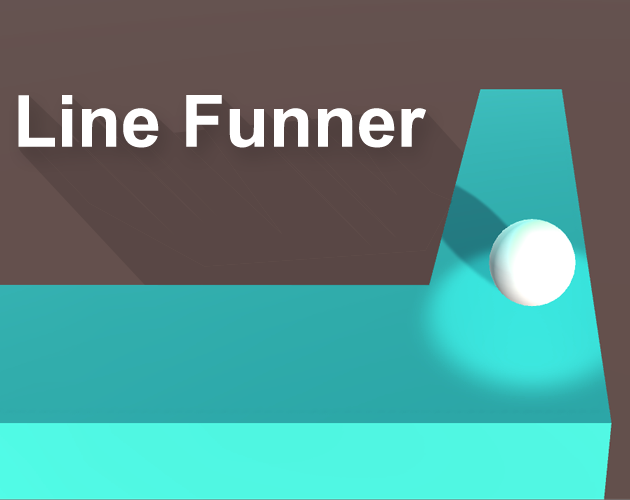
<style>
.page{position:relative;width:630px;height:500px}
.page>*{position:absolute;margin:0}
.t1{font:72px "Arial-BoldMT";color:#ffffff}
</style>
<div class="page">
<p class="t1" style="left:18px;top:95px;width:408px;height:53px">Line Funner</p>
</div>
